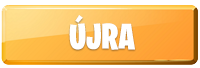
<style>
.page{position:relative;width:200px;height:68px}
.page>*{position:absolute;margin:0}
.t1{font:36px "BurbankBigCondensed-Black";letter-spacing:0.005em;color:#ffffff}
</style>
<div class="page">
<p class="t1" style="left:69px;top:15px;width:66px;height:35px">ÚJRA</p>
</div>
